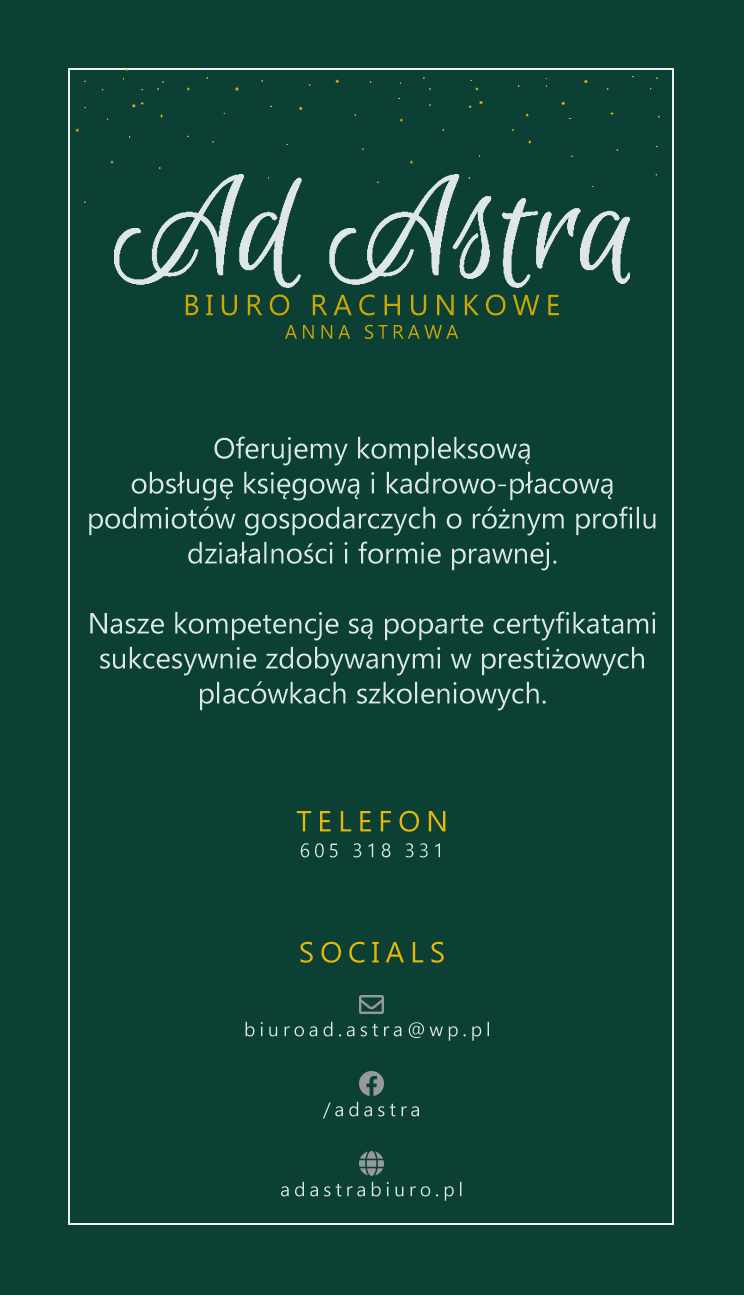
<style>
.page{position:relative;width:744px;height:1295px;background:#0c4034}
.page>*{position:absolute;margin:0}
.t1{font:29.2px "Gadugi";letter-spacing:0.2em;color:#cea600;text-transform:uppercase}
.t2{font:19.4px "Gadugi";letter-spacing:0.2em;color:#cea600;text-transform:uppercase}
.t3{font:29.2px "Gadugi";color:#dfe7e6}
.t4{font:29.2px "MyriadPro-Regular";color:#dfe7e6}
.t5{font:29.2px "Gadugi";letter-spacing:0.2em;color:#eab605;text-transform:uppercase}
.t6{font:19.4px "Gadugi";letter-spacing:0.2em;color:#dfe7e6;text-transform:uppercase}
.t7{font:19.4px "Gadugi";letter-spacing:0.2em;color:#dfe7e6}
</style>
<div class="page">
<p class="t1" style="left:185px;top:294px;width:374px;height:45px;text-align:center">biuro rachunkowe<br><span class="t2">anna strawa</span></p>
<p class="t3" style="left:89px;top:436px;width:567px;height:275px;text-align:center">Oferujemy kompleksową <br>obsługę księgową i kadrowo-płacową <br>podmiotów gospodarczych o ró<span class="t4">ż</span>nym profilu działalno<span class="t4">ś</span>ci i formie prawnej.<br><br>Nasze kompetencje są poparte certyfikatami sukcesywnie zdobywanymi w presti<span class="t4">ż</span>owych placówkach szkoleniowych.</p>
<p class="t5" style="left:296px;top:810px;width:150px;height:22px">telefon</p>
<p class="t6" style="left:300px;top:843px;width:140px;height:15px">605 318 331</p>
<p class="t5" style="left:300px;top:941px;width:144px;height:22px">socials</p>
<p class="t7" style="left:245px;top:1021px;width:244px;height:20px">biuroad.astra@wp.pl</p>
<p class="t7" style="left:322px;top:1101px;width:97px;height:18px">/adastra</p>
<p class="t7" style="left:281px;top:1181px;width:181px;height:20px">adastrabiuro.pl</p>
</div>
